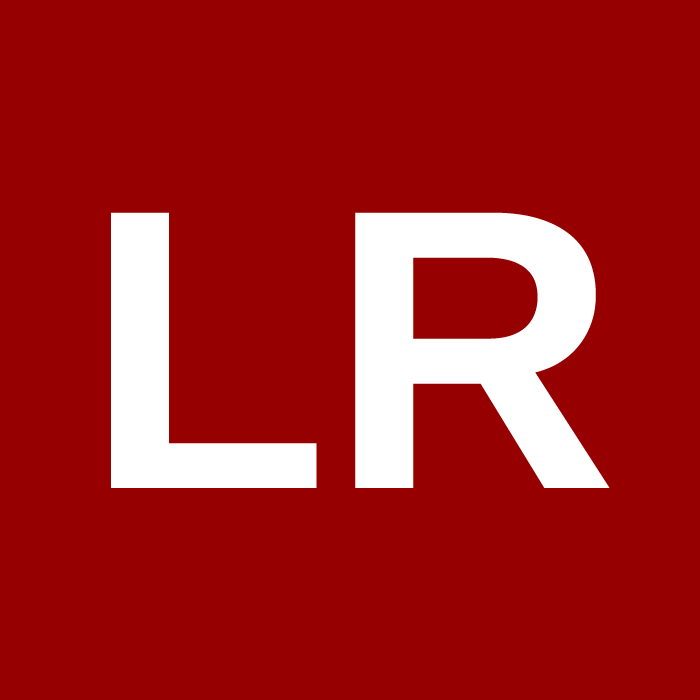
<style>
.page{position:relative;width:700px;height:700px;background:#970000}
.page>*{position:absolute;margin:0}
.t1{font:400px "LiberationSans-Bold";color:#ffffff}
</style>
<div class="page">
<p class="t1" style="left:111px;top:212px;width:499px;height:276px">LR</p>
</div>
